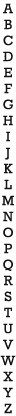
<style>
.page{position:relative;width:16px;height:416px;background:#ffffff}
.page>*{position:absolute;margin:0}
.t1{font:16.4px/16px "Rokkitt";color:#121212}
</style>
<div class="page">
<p class="t1" style="left:0px;top:3px;width:16px;height:411px;text-align:center">A<br>B<br>C<br>D<br>E<br>F<br>G<br>H<br>I<br>J<br>K<br>L<br>M<br>N<br>O<br>P<br>Q<br>R<br>S<br>T<br>U<br>V<br>W<br>X<br>Y<br>Z</p>
</div>
